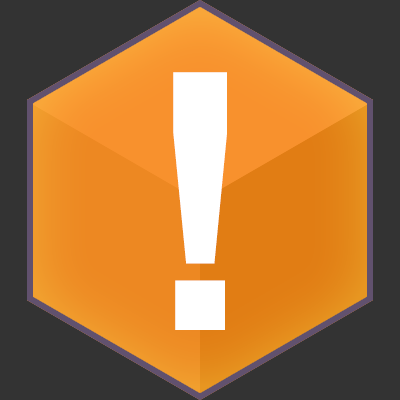
<style>
.page{position:relative;width:400px;height:400px;background:#333333}
.page>*{position:absolute;margin:0}
.t1{font:360px "Arial-BoldMT";color:#ffffff}
</style>
<div class="page">
<p class="t1" style="left:173px;top:72px;width:54px;height:258px">!</p>
</div>
